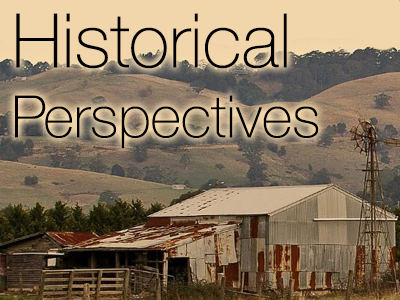
<style>
.page{position:relative;width:400px;height:300px}
.page>*{position:absolute;margin:0}
.t1{font:58.3px "HelveticaNeue-Thin";color:#000000}
.t2{font:75px "HelveticaNeue-Thin";color:#000000}
</style>
<div class="page">
<p class="t1" style="left:15px;top:13px;width:304px;height:136px"><span class="t2">Historical<br></span>Perspectives</p>
</div>
